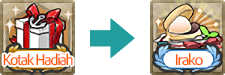
<style>
.page{position:relative;width:225px;height:75px;background:#ffffff}
.page>*{position:absolute;margin:0}
.t1{font:16px "AdobeClean-SemiCn";letter-spacing:-0.08em;color:#ff5a00}
.t2{font:16px "AdobeClean-Regular";letter-spacing:-0.08em;color:#ff5a00}
</style>
<div class="page">
<p class="t1" style="left:3px;top:53px;width:70px;height:13px">Kotak Hadiah</p>
<p class="t2" style="left:175px;top:53px;width:28px;height:13px">Irako</p>
</div>
